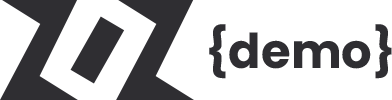
<style>
.page{position:relative;width:392px;height:100px;background:#ffffff}
.page>*{position:absolute;margin:0}
.t1{font:48px "Poppins-Bold";color:#2f2e32}
</style>
<div class="page">
<p class="t1" style="left:209px;top:24px;width:183px;height:55px">{demo}</p>
</div>
